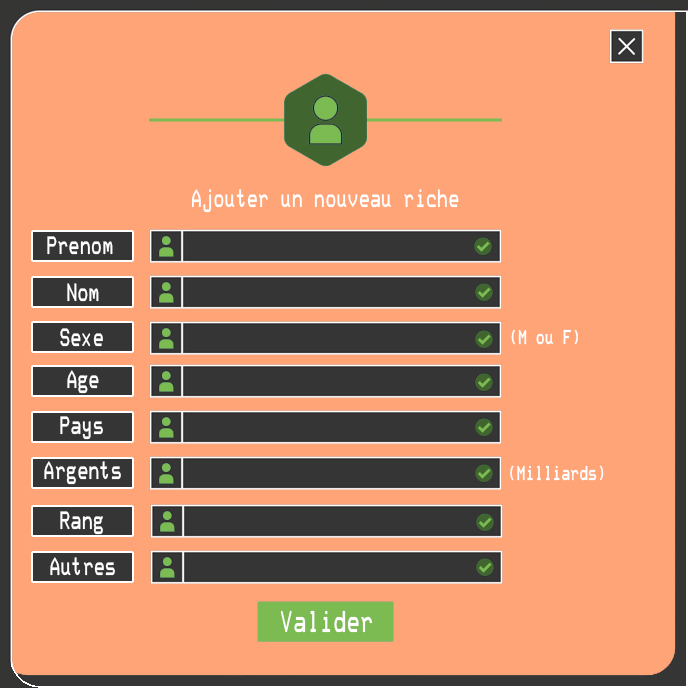
<style>
.page{position:relative;width:688px;height:688px;background:#ffa477}
.page>*{position:absolute;margin:0}
.t1{font:25px "DEC-Terminal-Modern-Regular";letter-spacing:0.03em;color:#ffffff}
.t2{font:20px "DEC-Terminal-Modern-Regular";letter-spacing:0.03em;color:#ffffff}
.t3{font:30px "DEC-Terminal-Modern-Regular";letter-spacing:0.03em;color:#ffffff}
</style>
<div class="page">
<p class="t1" style="left:192px;top:189px;width:267px;height:24px">Ajouter un nouveau riche</p>
<p class="t1" style="left:47px;top:236px;width:66px;height:19px">Prenom</p>
<p class="t1" style="left:67px;top:283px;width:32px;height:19px">Nom</p>
<p class="t1" style="left:60px;top:328px;width:43px;height:19px">Sexe</p>
<p class="t2" style="left:511px;top:329px;width:67px;height:16px">(M ou F)</p>
<p class="t1" style="left:67px;top:370px;width:32px;height:24px">Age</p>
<p class="t1" style="left:60px;top:416px;width:43px;height:24px">Pays</p>
<p class="t1" style="left:44px;top:461px;width:77px;height:24px">Argents</p>
<p class="t2" style="left:510px;top:465px;width:94px;height:16px">(Milliards)</p>
<p class="t1" style="left:60px;top:511px;width:43px;height:24px">Rang</p>
<p class="t1" style="left:50px;top:557px;width:65px;height:19px">Autres</p>
<p class="t3" style="left:280px;top:610px;width:93px;height:23px">Valider</p>
</div>
